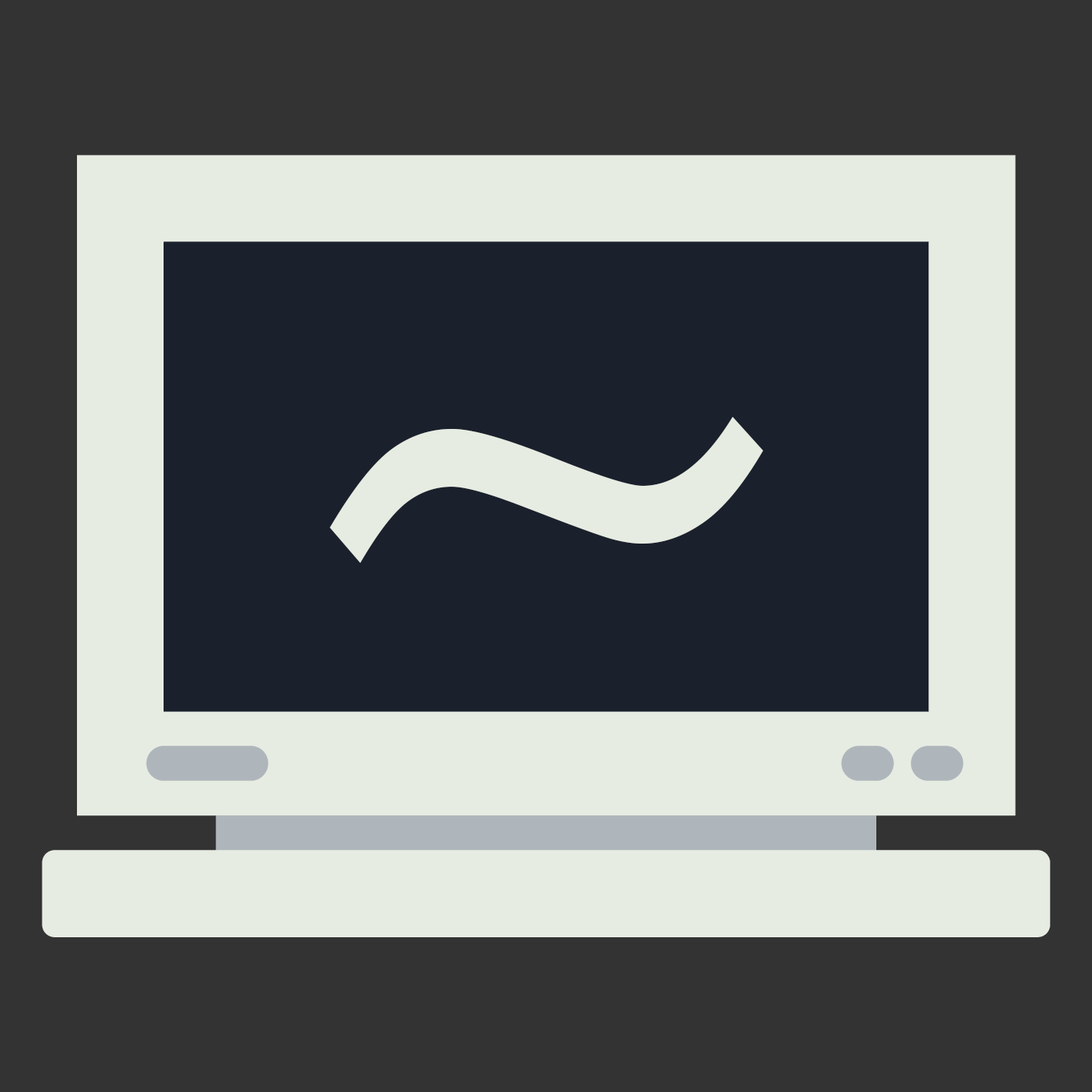
<style>
.page{position:relative;width:1092px;height:1092px;background:#333333}
.page>*{position:absolute;margin:0}
.t1{font:1002.2px "MonotypeCorsiva";color:#e7ece3}
</style>
<div class="page">
<p class="t1" style="left:330px;top:417px;width:433px;height:146px">~</p>
</div>
